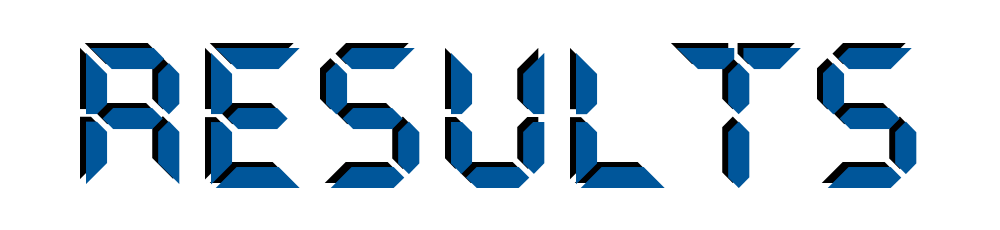
<style>
.page{position:relative;width:1000px;height:230px;background:#ffffff}
.page>*{position:absolute;margin:0}
.t1{font:200px "QuartzMS"}
.t2{font:200px "QuartzMS";color:#00569a}
</style>
<div class="page">
<p class="t1" style="left:80px;top:43px;width:831px;height:140px">RESULTS</p>
<p class="t2" style="left:86px;top:48px;width:831px;height:140px">RESULTS</p>
</div>
